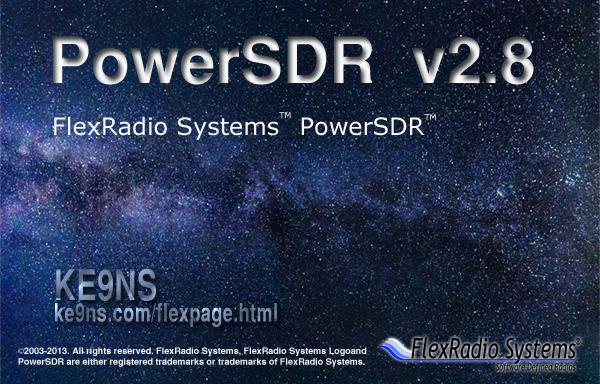
<style>
.page{position:relative;width:600px;height:384px}
.page>*{position:absolute;margin:0}
.t1{font:64px "SansSerifBold"}
.t2{font:24px "MSReferenceSansSerif";color:#f5f8fa}
.t3{font:14px "MSReferenceSansSerif";color:#f5f8fa}
.t4{font:25.2px "SansSerifBold";letter-spacing:0.025em;scale:0.71 1}
.t5{font:42px "SansSerifBold";letter-spacing:0.025em;scale:0.71 1}
.t6{font:9px "SansSerifBold";color:#f5f8fa}
.t7{font:9px "MyriadPro-Regular";color:#f5f8fa}
</style>
<div class="page">
<p class="t1" style="left:52px;top:35px;width:482px;height:50px">PowerSDR  v2.8</p>
<p class="t2" style="left:54px;top:112px;width:382px;height:28px">FlexRadio Systems<span class="t3">TM</span> PowerSDR<span class="t3">TM</span></p>
<p class="t4" style="left:55px;top:268px;width:222px;height:59px"><span class="t5">KE9NS<br></span>ke9ns.com/flexpage.html</p>
<p class="t6" style="left:18px;top:347px;width:349px;height:20px"><span class="t7">©</span>2003-2013. All rights reserved. FlexRadio Systems, FlexRadio Systems Logoand<br>PowerSDR are either registered trademarks or trademarks of FlexRadio Systems.</p>
</div>
